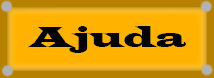
<style>
.page{position:relative;width:214px;height:78px;background:#ffb300}
.page>*{position:absolute;margin:0}
.t1{font:30px "LatinWide";color:#000000}
</style>
<div class="page">
<p class="t1" style="left:28px;top:26px;width:158px;height:27px">Ajuda</p>
</div>
